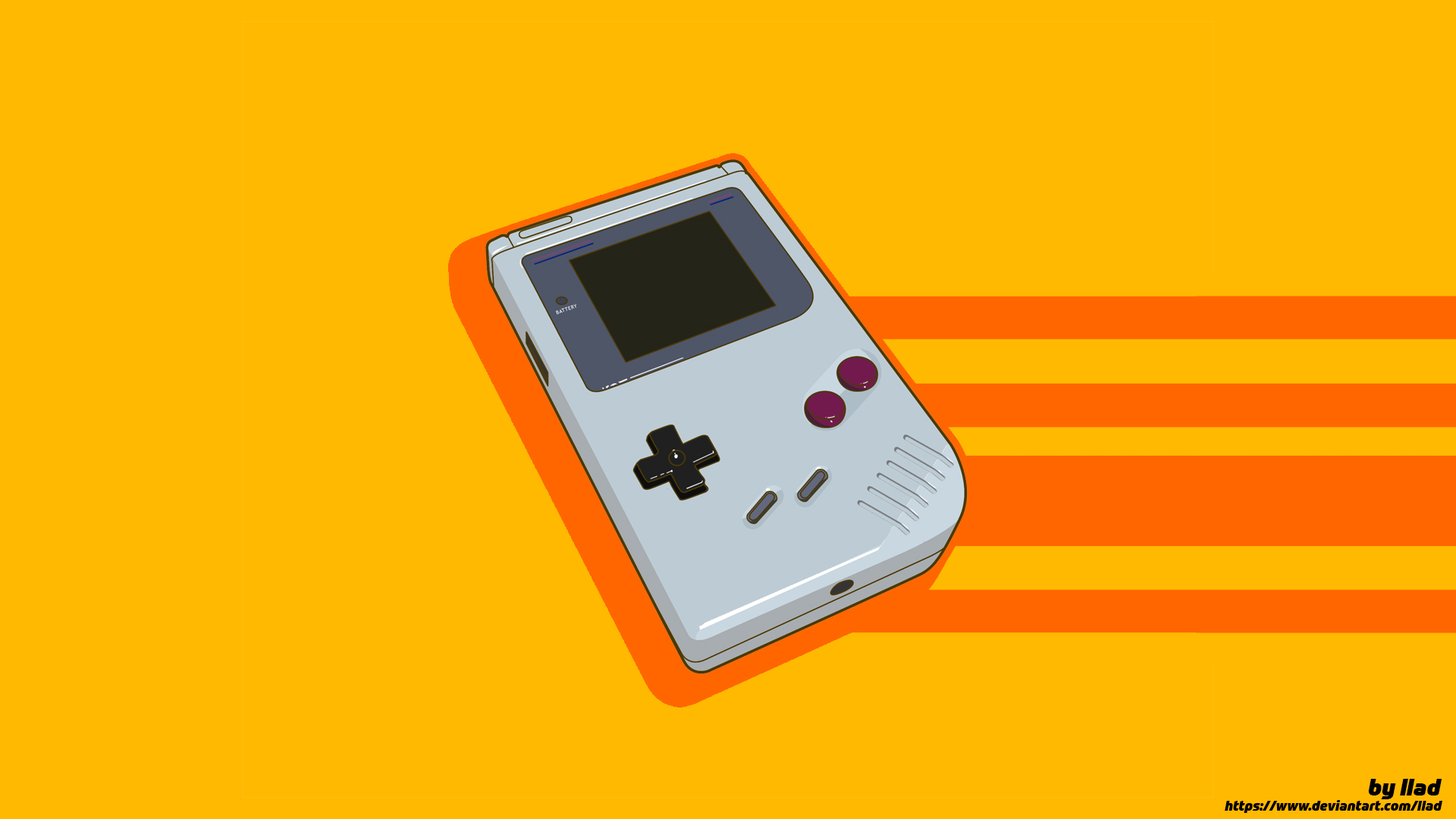
<style>
.page{position:relative;width:1456px;height:819px;background:#ffb900}
.page>*{position:absolute;margin:0}
.t1{font:22.7px "Prometo-BlackItalic";color:#000000}
.t2{font:13.6px "Prometo-BlackItalic";color:#000000}
</style>
<div class="page">
<p class="t1" style="left:1368px;top:779px;width:74px;height:20px">by llad</p>
<p class="t2" style="left:1225px;top:800px;width:217px;height:13px">https://www.deviantart.com/llad</p>
</div>
